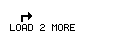
<style>
.page{position:relative;width:128px;height:32px;background:#ffffff}
.page>*{position:absolute;margin:0}
.t1{font:10px "Terminal";color:#000000}
</style>
<div class="page">
<p class="t1" style="left:10px;top:24px;width:65px;height:7px">LOAD 2 MORE</p>
</div>
